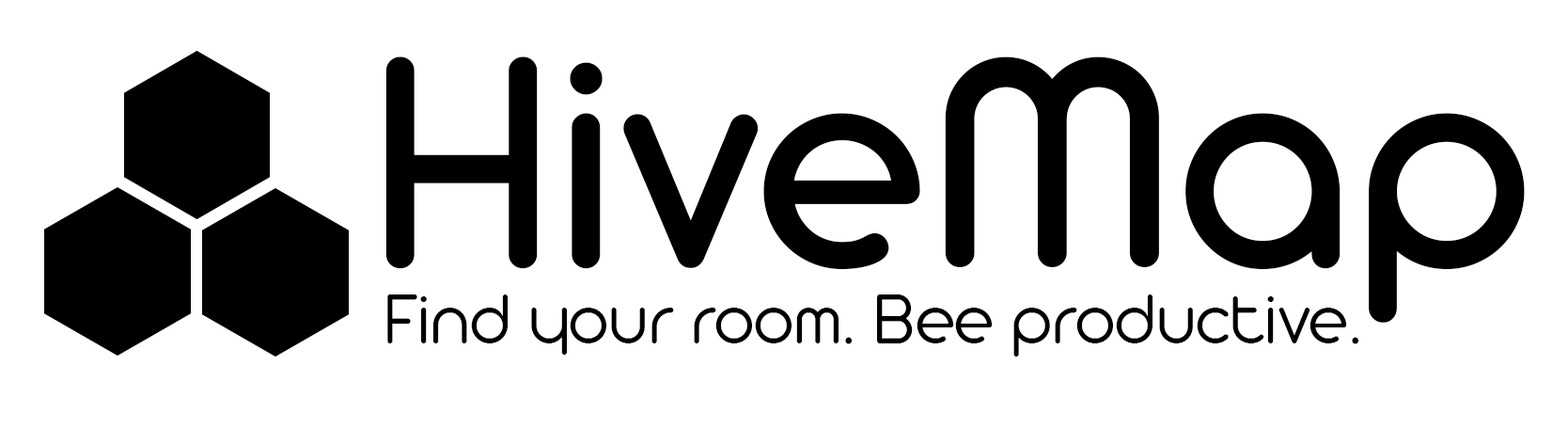
<style>
.page{position:relative;width:1568px;height:429px;background:#ffffff}
.page>*{position:absolute;margin:0}
.t1{font:326.3px "AristaProTrial-Regular";color:#000000}
.t2{font:75.6px "AristaProTrial-Light";color:#000000}
</style>
<div class="page">
<p class="t1" style="left:385px;top:56px;width:1140px;height:266px">HiveMap</p>
<p class="t2" style="left:387px;top:294px;width:972px;height:62px">Find your room. Bee productive.</p>
</div>
